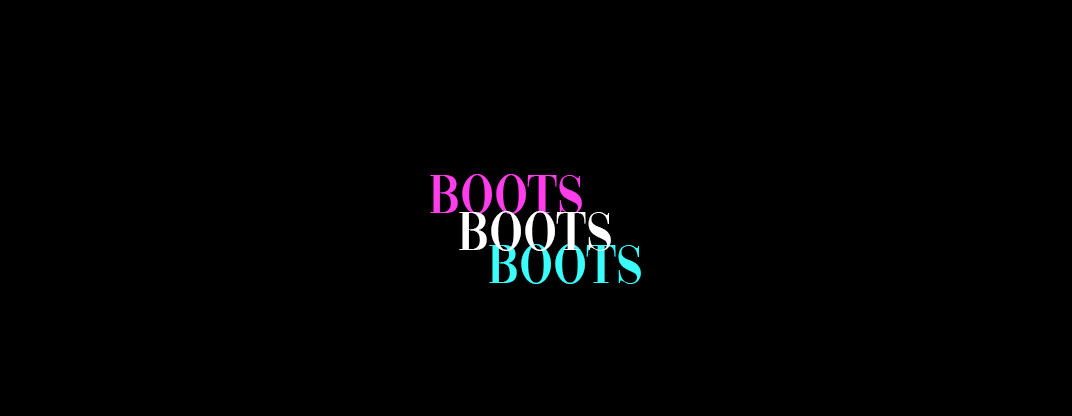
<style>
.page{position:relative;width:1072px;height:416px;background:#000000}
.page>*{position:absolute;margin:0}
.t1{font:57px "Vogue-Regular";color:#ff3dea}
.t2{font:57px "Vogue-Regular";color:#ffffff}
.t3{font:57px "Vogue-Regular";color:#3bfffd}
</style>
<div class="page">
<p class="t1" style="left:430px;top:174px;width:152px;height:40px">BOOTS</p>
<p class="t2" style="left:459px;top:211px;width:152px;height:40px">BOOTS</p>
<p class="t3" style="left:489px;top:244px;width:152px;height:40px">BOOTS</p>
</div>
